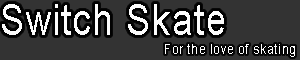
<style>
.page{position:relative;width:300px;height:60px;background:#333333}
.page>*{position:absolute;margin:0}
.t1{font:43.2px "ArialMT";letter-spacing:0.05em;color:#ffffff;scale:0.83 1}
.t2{font:14.4px "ArialMT";letter-spacing:0.05em;color:#ffffff;scale:0.83 1}
</style>
<div class="page">
<p class="t1" style="left:2px;top:4px;width:222px;height:31px">Switch Skate</p>
<p class="t2" style="left:165px;top:44px;width:130px;height:13px">For the love of skating</p>
</div>
